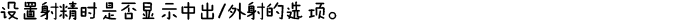
<style>
.page{position:relative;width:687px;height:21px;background:#ffffff}
.page>*{position:absolute;margin:0}
.t1{font:22px "¢è?";color:#000000}
</style>
<div class="page">
<p class="t1" style="left:0px;top:1px;width:337px;height:19px">设置射精时是否显示中出/外射的选项。</p>
</div>
